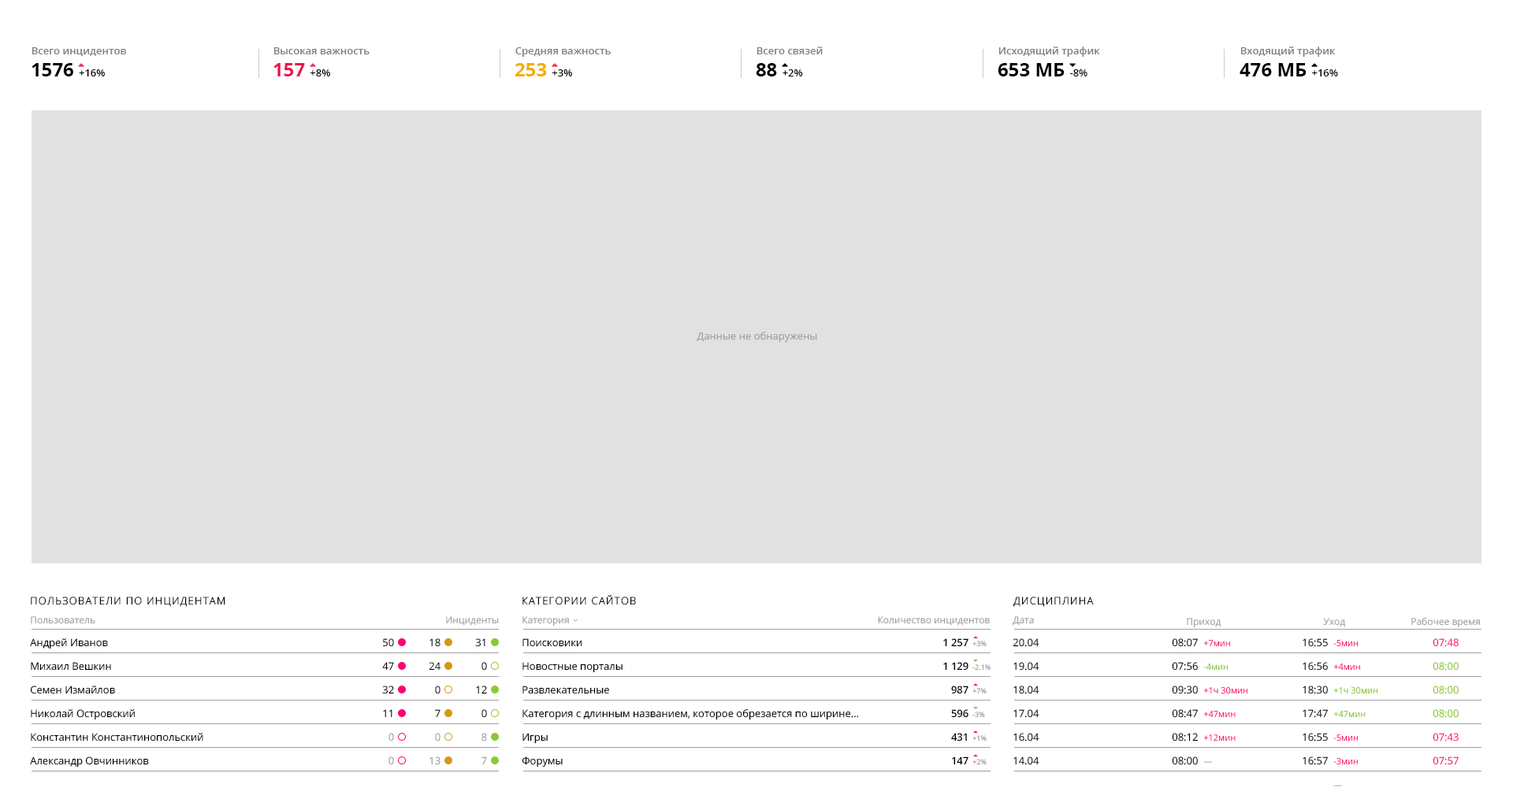
<style>
.page{position:relative;width:1513px;height:788px;background:#e1e1e1}
.page>*{position:absolute;margin:0}
.t1{font:10.2px "OpenSans-Semibold";color:#808080}
.t2{font:18.9px "OpenSans-Bold";color:#000000}
.t3{font:10.2px "OpenSans-Semibold";color:#000000}
.t4{font:18.9px "OpenSans-Bold";color:#ee144e}
.t5{font:18.9px "OpenSans-Bold";color:#f1ae00}
.t6{font:10.2px "OpenSans";color:#a0a0a0}
.t7{font:10.2px "OpenSans-Light";letter-spacing:0.1em;color:#000000;text-transform:uppercase}
.t8{font:9.5px "OpenSans";color:#a0a0a0}
.t9{font:10.2px/23.6px "OpenSans";color:#000000}
.t10{font:10.2px/23.6px "OpenSans-Semibold";color:#000000}
.t11{font:7.1px/23.6px "OpenSans";color:#a0a0a0}
.t12{font:8.7px/23.6px "OpenSans";color:#ff0072}
.t13{font:8.7px/23.6px "OpenSans";color:#8bc834}
.t14{font:8.7px/23.6px "OpenSans";color:#a0a0a0}
.t15{font:10.2px/23.6px "OpenSans";color:#8bc834}
.t16{font:10.2px/23.6px "OpenSans";color:#ff0072}
</style>
<div class="page">
<p class="t1" style="left:32px;top:47px;width:94px;height:9px">Всего инцидентов</p>
<p class="t1" style="left:273px;top:47px;width:97px;height:7px">Высокая важность</p>
<p class="t1" style="left:515px;top:47px;width:96px;height:10px">Средняя важность</p>
<p class="t1" style="left:757px;top:46px;width:66px;height:8px">Всего связей</p>
<p class="t1" style="left:998px;top:46px;width:102px;height:11px">Исходящий трафик</p>
<p class="t1" style="left:1240px;top:46px;width:96px;height:11px">Входящий трафик</p>
<p class="t2" style="left:32px;top:63px;width:73px;height:13px">1576 <span class="t3">+16%</span></p>
<p class="t4" style="left:273px;top:63px;width:57px;height:13px">157 <span class="t3">+8%</span></p>
<p class="t5" style="left:515px;top:63px;width:57px;height:13px">253 <span class="t3">+3%</span></p>
<p class="t3" style="left:756px;top:63px;width:47px;height:13px"><span class="t2">88 </span>+2%</p>
<p class="t2" style="left:998px;top:63px;width:90px;height:13px">653 МБ <span class="t3">-8%</span></p>
<p class="t2" style="left:1240px;top:63px;width:98px;height:13px">476 МБ <span class="t3">+16%</span></p>
<p class="t6" style="left:697px;top:332px;width:120px;height:10px">Данные не обнаружены</p>
<p class="t7" style="left:31px;top:597px;width:194px;height:10px">ПОЛЬЗОВАТЕЛИ ПО ИНЦИДЕНТАМ</p>
<p class="t7" style="left:522px;top:595px;width:114px;height:10px">Категории сайтов</p>
<p class="t7" style="left:1013px;top:597px;width:81px;height:10px">Дисциплина</p>
<p class="t8" style="left:31px;top:616px;width:64px;height:8px">Пользователь</p>
<p class="t8" style="left:446px;top:616px;width:53px;height:10px">Инциденты</p>
<p class="t8" style="left:522px;top:616px;width:47px;height:11px">Категория</p>
<p class="t8" style="left:878px;top:616px;width:112px;height:10px">Количество инцидентов</p>
<p class="t8" style="left:1013px;top:616px;width:21px;height:10px">Дата</p>
<p class="t8" style="left:1187px;top:618px;width:35px;height:10px">Приход</p>
<p class="t8" style="left:1323px;top:618px;width:22px;height:9px">Уход</p>
<p class="t8" style="left:1411px;top:617px;width:69px;height:11px">Рабочее время</p>
<p class="t9" style="left:30px;top:638px;width:173px;height:130px">Андрей Иванов<br>Михаил Вешкин<br>Семен Измайлов<br>Николай Островский<br>Константин Константинопольский<br>Александр Овчинников</p>
<p class="t9" style="left:382px;top:638px;width:12px;height:127px;text-align:right">50<br>47<br>32<br>11<br>0<br>0</p>
<p class="t9" style="left:429px;top:638px;width:12px;height:127px;text-align:right">18<br>24<br>0<br>7<br>0<br>13</p>
<p class="t9" style="left:475px;top:638px;width:12px;height:127px;text-align:right">31<br>0<br>12<br>0<br>8<br>7</p>
<p class="t9" style="left:522px;top:638px;width:337px;height:130px">Поисковики<br>Новостные порталы<br>Развлекательные<br>Категория с длинным названием, которое обрезается по ширине...<br>Игры<br>Форумы</p>
<p class="t10" style="left:943px;top:638px;width:26px;height:127px;text-align:right">1 257<br>1 129<br>987<br>596<br>431<br>147</p>
<p class="t11" style="left:972px;top:641px;width:19px;height:124px">+3%<br>-2.1%<br>+7%<br>-3%<br>+1%<br>+2%</p>
<p class="t9" style="left:1013px;top:638px;width:26px;height:127px">20.04<br>19.04<br>18.04<br>17.04<br>16.04<br>14.04</p>
<p class="t9" style="left:1172px;top:638px;width:26px;height:127px">08:07<br>07:56<br>09:30<br>08:47<br>08:12<br>08:00</p>
<p class="t12" style="left:1203px;top:640px;width:45px;height:123px">+7мин<br>-4мин<br>+1ч 30мин<br>+47мин<br>+12мин<br>—</p>
<p class="t9" style="left:1303px;top:638px;width:25px;height:127px">16:55<br>16:56<br>18:30<br>17:47<br>16:55<br>16:57</p>
<p class="t13" style="left:1333px;top:640px;width:45px;height:146px"><span class="t12">-5мин<br>+4мин<br></span>+1ч 30мин<br>+47мин<br><span class="t12">-5мин<br>-3мин<br></span><span class="t14">—</span></p>
<p class="t15" style="left:1433px;top:638px;width:26px;height:127px"><span class="t16">07:48<br></span>08:00<br>08:00<br>08:00<br><span class="t16">07:43<br>07:57</span></p>
</div>
